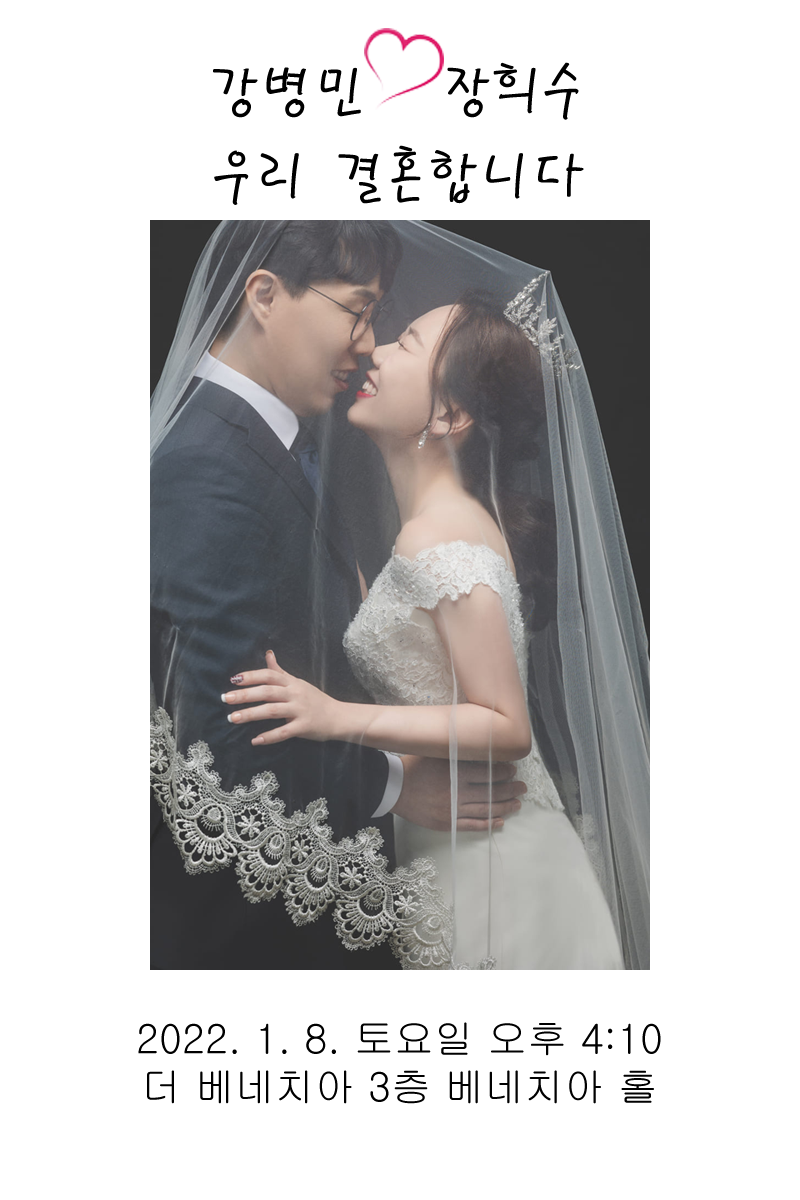
<style>
.page{position:relative;width:800px;height:1200px;background:#ffffff}
.page>*{position:absolute;margin:0}
.t1{font:60px "PyunjiR-HM";color:#000000}
.t2{font:40px "Gulim";color:#000000}
</style>
<div class="page">
<p class="t1" style="left:213px;top:62px;width:366px;height:58px">강병민   장희수</p>
<p class="t1" style="left:214px;top:145px;width:370px;height:60px">우리 결혼합니다</p>
<p class="t2" style="left:138px;top:1022px;width:523px;height:82px;text-align:center">2022. 1. 8. 토요일 오후 4:10<br>더 베네치아 3층 베네치아 홀</p>
</div>
